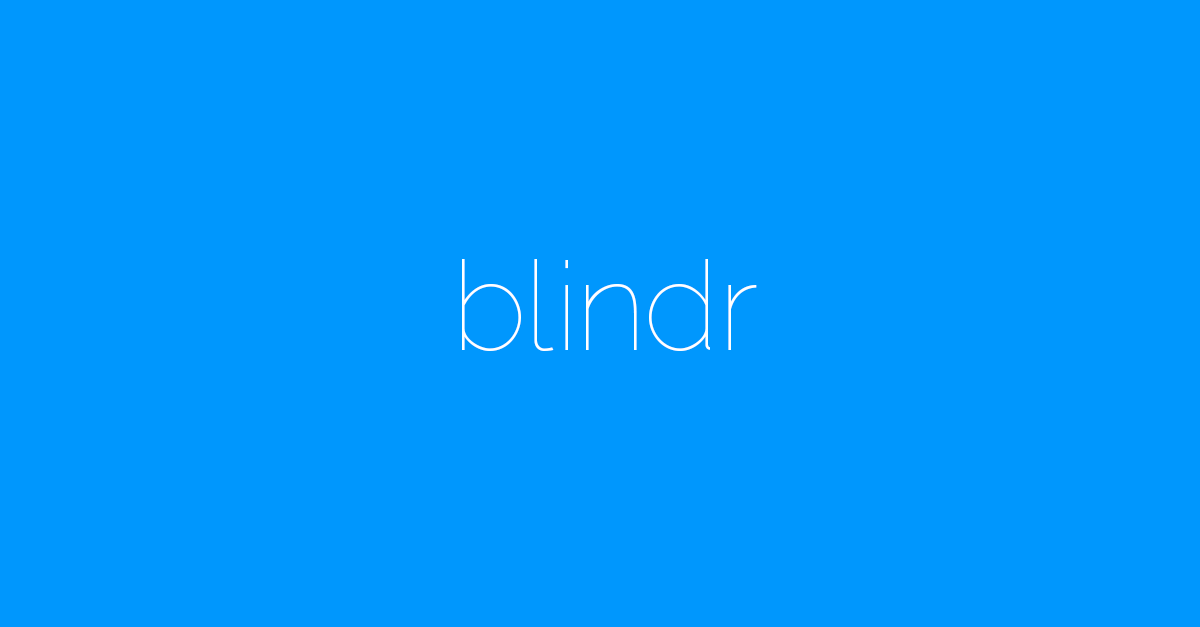
<style>
.page{position:relative;width:1200px;height:627px;background:#0097fd}
.page>*{position:absolute;margin:0}
.t1{font:125px "Raleway-Thin";color:#ffffff}
</style>
<div class="page">
<p class="t1" style="left:462px;top:259px;width:295px;height:92px">blindr</p>
</div>
